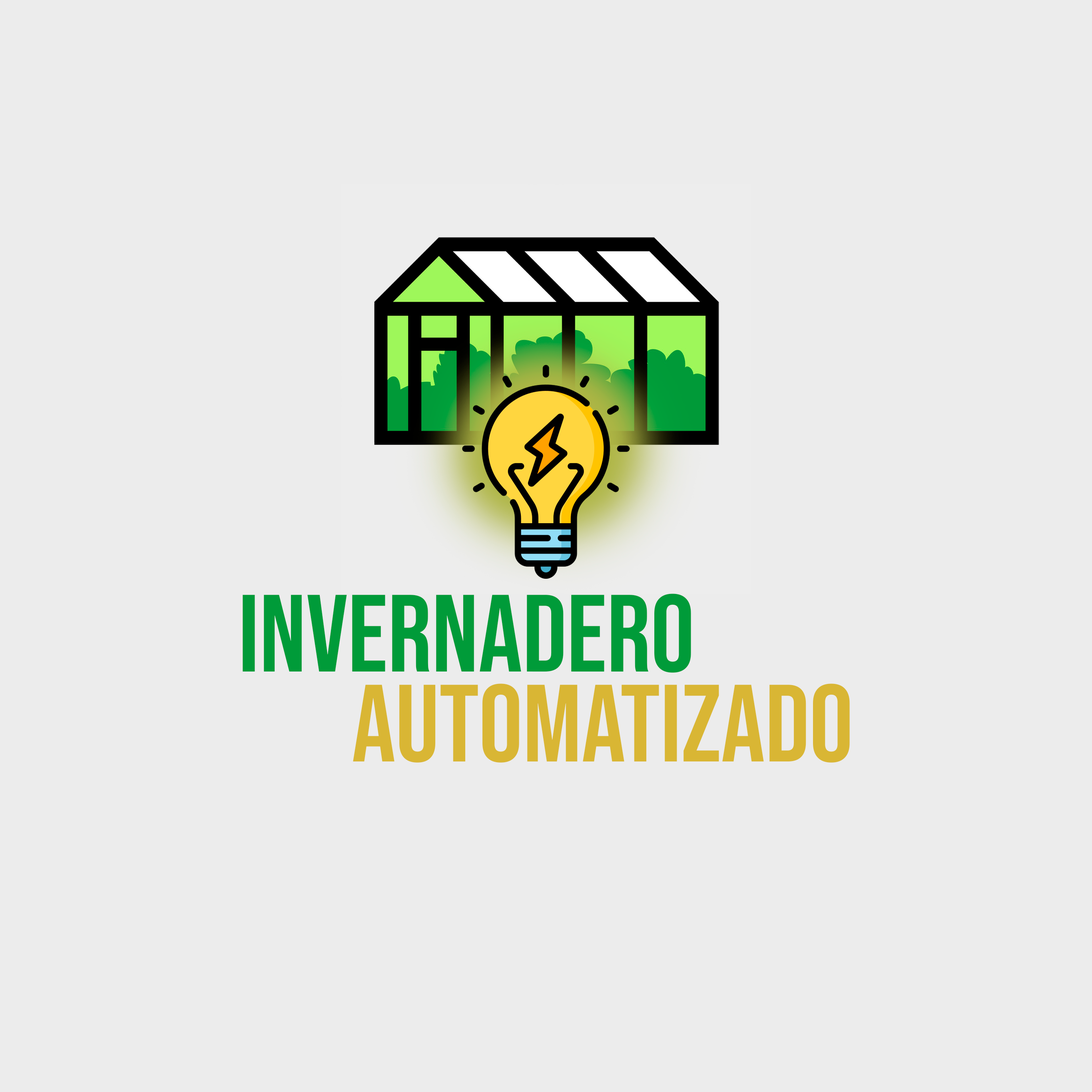
<style>
.page{position:relative;width:1092px;height:1092px;background:#ececec}
.page>*{position:absolute;margin:0}
.t1{font:109.5px "BebasNeue-Regular";color:#009b39}
.t2{font:109.5px "BebasNeue-Regular";color:#d9b634}
</style>
<div class="page">
<p class="t1" style="left:243px;top:594px;width:448px;height:79px">Invernadero</p>
<p class="t2" style="left:353px;top:683px;width:497px;height:80px">Automatizado</p>
</div>
